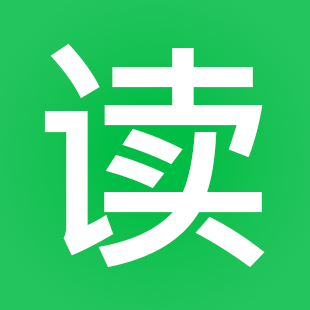
<style>
.page{position:relative;width:310px;height:310px;background:#ffffff}
.page>*{position:absolute;margin:0}
.t1{font:250px "MicrosoftJhengHeiUIBold";letter-spacing:0.025em;color:#ffffff}
</style>
<div class="page">
<p class="t1" style="left:44px;top:44px;width:221px;height:223px">读</p>
</div>
